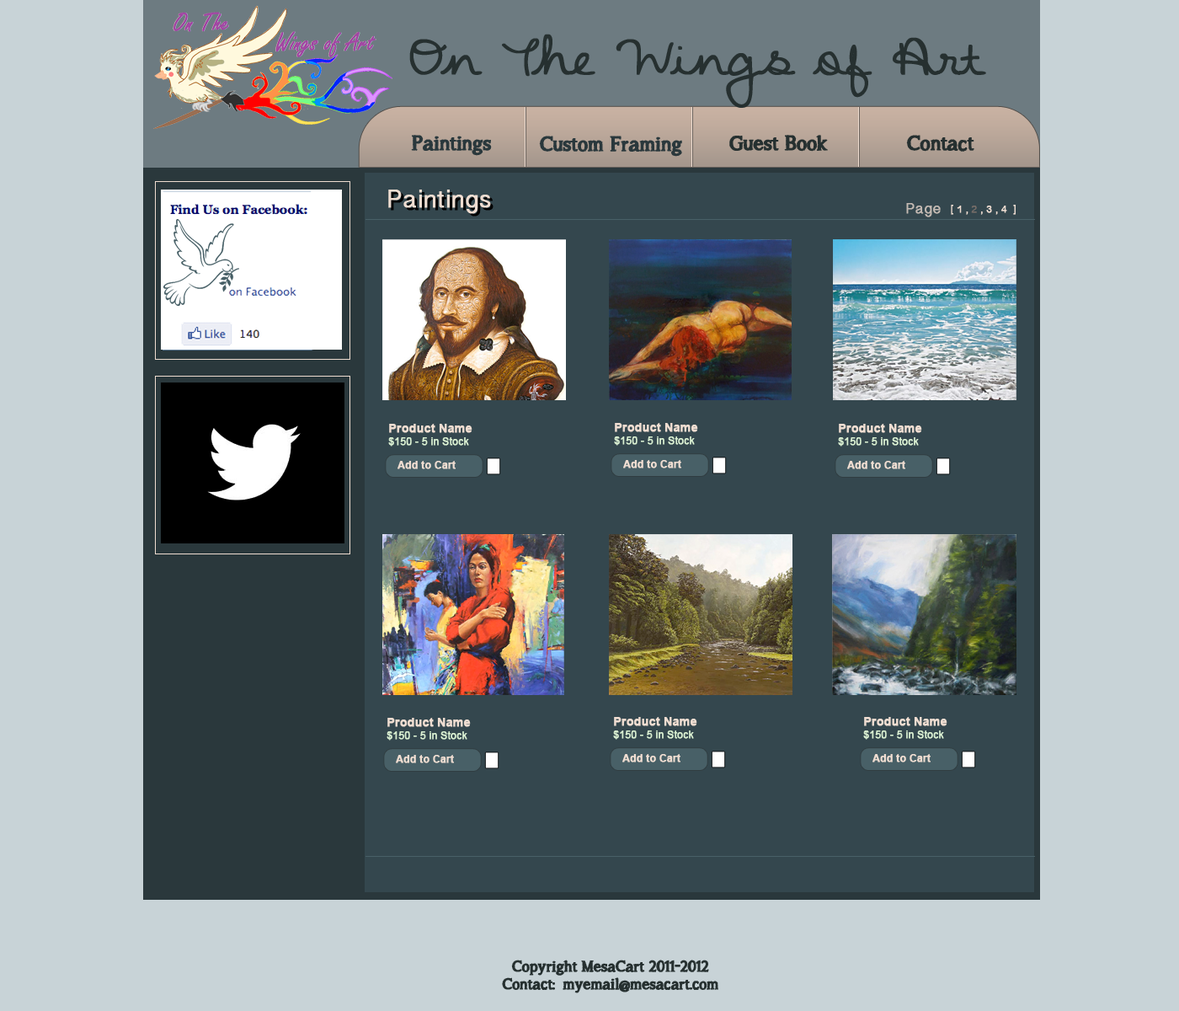
<style>
.page{position:relative;width:1179px;height:1011px;background:#c8d3d7}
.page>*{position:absolute;margin:0}
.t1{font:42.1px "StarsFromOurEyes";color:#263030;font-weight:bold}
.t2{font:20.2px "asongforjennifer";color:#2a383c;font-weight:bold}
.t3{font:20.2px "asongforjennifer";color:#263030;font-weight:bold}
.t4{font:25.3px "LaoSangamMN";color:#efddd1;font-weight:bold}
.t5{font:25.3px "LaoSangamMN";color:#000000;font-weight:bold}
.t6{font:15.2px "LaoSangamMN";color:#c4bab3;font-weight:bold}
.t7{font:10.1px "LaoSangamMN";color:#efddd1;font-weight:bold}
.t8{font:10.1px "LaoSangamMN";color:#766d68;font-weight:bold}
.t9{font:10.1px "ArialMT";color:#d9efd1;font-weight:bold}
.t10{font:11.8px "Arial-BoldMT";color:#efddd1;font-weight:bold}
.t11{font:10.1px "Arial-BoldMT";color:#efddd1;font-weight:bold}
.t12{font:15.2px "asongforjennifer";color:#263030;font-weight:bold}
</style>
<div class="page">
<p class="t1" style="left:409px;top:34px;width:578px;height:74px">On The Wings of Art</p>
<p class="t2" style="left:411px;top:135px;width:81px;height:21px">Paintings</p>
<p class="t2" style="left:539px;top:136px;width:143px;height:21px">Custom Framing</p>
<p class="t3" style="left:730px;top:135px;width:98px;height:17px">Guest Book</p>
<p class="t3" style="left:907px;top:135px;width:68px;height:17px">Contact</p>
<p class="t4" style="left:388px;top:190px;width:103px;height:24px">Paintings</p>
<p class="t5" style="left:391px;top:192px;width:103px;height:25px">Paintings</p>
<p class="t6" style="left:907px;top:203px;width:34px;height:14px">Page</p>
<p class="t7" style="left:951px;top:205px;width:65px;height:10px">[ 1 , <span class="t8">2</span> , 3 , 4  ]</p>
<p class="t9" style="left:388px;top:424px;width:85px;height:23px"><span class="t10">Product Name<br></span>$150 - 5 in Stock</p>
<p class="t9" style="left:614px;top:423px;width:84px;height:23px"><span class="t10">Product Name<br></span>$150 - 5 in Stock</p>
<p class="t9" style="left:838px;top:424px;width:85px;height:23px"><span class="t10">Product Name<br></span>$150 - 5 in Stock</p>
<p class="t11" style="left:398px;top:461px;width:58px;height:8px">Add to Cart</p>
<p class="t11" style="left:623px;top:460px;width:59px;height:8px">Add to Cart</p>
<p class="t11" style="left:848px;top:461px;width:58px;height:8px">Add to Cart</p>
<p class="t9" style="left:387px;top:718px;width:84px;height:23px"><span class="t10">Product Name<br></span>$150 - 5 in Stock</p>
<p class="t9" style="left:613px;top:717px;width:85px;height:23px"><span class="t10">Product Name<br></span>$150 - 5 in Stock</p>
<p class="t9" style="left:864px;top:717px;width:84px;height:23px"><span class="t10">Product Name<br></span>$150 - 5 in Stock</p>
<p class="t11" style="left:396px;top:755px;width:58px;height:8px">Add to Cart</p>
<p class="t11" style="left:623px;top:754px;width:58px;height:8px">Add to Cart</p>
<p class="t11" style="left:873px;top:754px;width:58px;height:8px">Add to Cart</p>
<p class="t12" style="left:502px;top:960px;width:217px;height:33px;text-align:center">Copyright MesaCart 2011-2012<br>Contact: myemail@mesacart.com</p>
</div>
